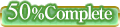
<style>
.page{position:relative;width:120px;height:27px;background:#ffffff}
.page>*{position:absolute;margin:0}
.t1{font:18px "RyuminPro-ExBold";letter-spacing:-0.08em;color:#ffffff}
.t2{font:23.8px "TimesNewRomanPSMT";color:#ffffff;scale:1.05 1}
.t3{font:16px "RyuminPro-ExBold";color:#ffffff}
</style>
<div class="page">
<p class="t1" style="left:8px;top:3px;width:104px;height:20px"><span class="t2">50</span><span class="t3">%</span>Complete</p>
</div>
